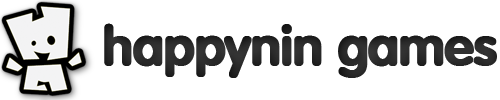
<style>
.page{position:relative;width:500px;height:100px;background:#ffffff}
.page>*{position:absolute;margin:0}
.t1{font:53.6px "VAGRounded-Bold";letter-spacing:-0.025em;color:#404040;font-weight:bold}
</style>
<div class="page">
<p class="t1" style="left:104px;top:23px;width:393px;height:55px">happynin games</p>
</div>
